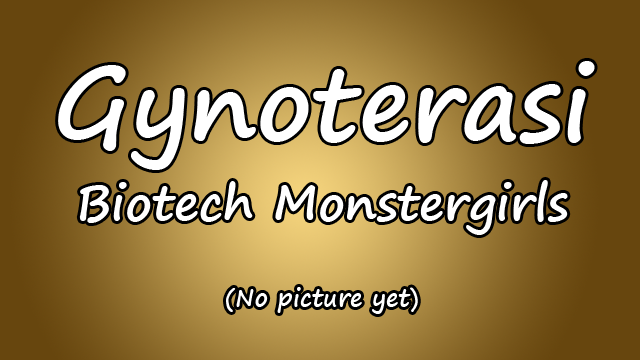
<style>
.page{position:relative;width:640px;height:360px}
.page>*{position:absolute;margin:0}
.t1{font:48px/80px "SegoePrint-Bold";color:#ffffff}
.t2{font:100px/80px "SegoePrint-Bold";color:#ffffff}
.t3{font:24px "SegoePrint-Bold";color:#ffffff}
</style>
<div class="page">
<p class="t1" style="left:58px;top:61px;width:537px;height:253px;text-align:center"><span class="t2">Gynoterasi<br></span>Biotech Monstergirls<br><span class="t3"><br><br>(No picture yet)</span></p>
</div>
